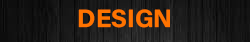
<style>
.page{position:relative;width:250px;height:42px}
.page>*{position:absolute;margin:0}
.t1{font:25px "AcuminConcept-Bold";color:#ff7300}
</style>
<div class="page">
<p class="t1" style="left:78px;top:9px;width:92px;height:19px">DESIGN</p>
</div>
